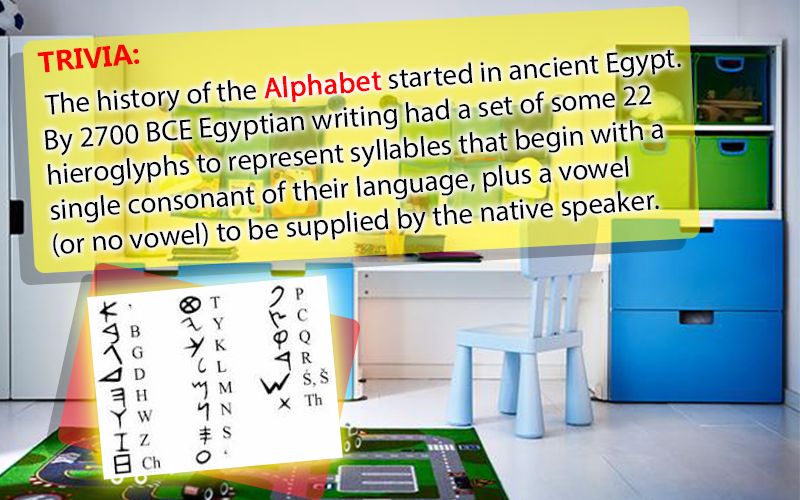
<style>
.page{position:relative;width:800px;height:500px}
.page>*{position:absolute;margin:0}
.t1{font:29.2px "KhmerUI-Bold";color:#f80202}
.t2{font:29.2px "MyriadPro-Regular";color:#000000}
.t3{font:29.2px "MyriadPro-Regular";color:#fe0101;font-weight:bold}
</style>
<div class="page">
<p class="t1" style="left:37px;top:44px;width:103px;height:29px;rotate:-6deg">TRIVIA:</p>
<p class="t2" style="left:44px;top:49px;width:637px;height:208px;rotate:-4deg">The history of the <span class="t3">Alphabet</span> started in ancient Egypt. By 2700 BCE Egyptian writing had a set of some 22 <br>hieroglyphs to represent syllables that begin with a single consonant of their language, plus a vowel <br>(or no vowel) to be supplied by the native speaker.</p>
</div>
